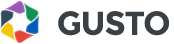
<style>
.page{position:relative;width:174px;height:44px;background:#ffffff}
.page>*{position:absolute;margin:0}
.t1{font:33px "Montserrat-Bold";letter-spacing:-0.025em;color:#3b4045}
</style>
<div class="page">
<p class="t1" style="left:58px;top:11px;width:111px;height:25px">GUSTO</p>
</div>
